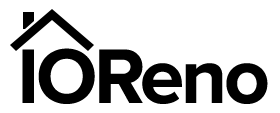
<style>
.page{position:relative;width:280px;height:113px;background:#ffffff}
.page>*{position:absolute;margin:0}
.t1{font:80px "ProximaNovaA-Bold";letter-spacing:-0.04em;color:#000000}
</style>
<div class="page">
<p class="t1" style="left:22px;top:48px;width:246px;height:56px">IOReno</p>
</div>
